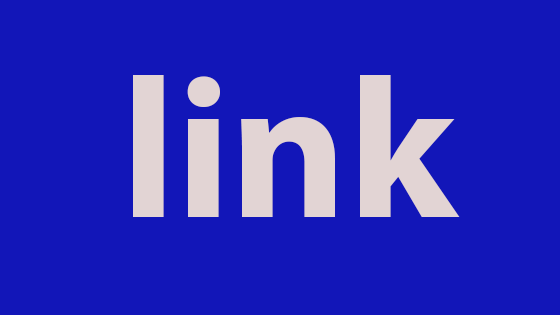
<style>
.page{position:relative;width:560px;height:315px;background:#1216b8}
.page>*{position:absolute;margin:0}
.t1{font:200px "MyriadPro-Bold";color:#e2d4d4}
</style>
<div class="page">
<p class="t1" style="left:133px;top:75px;width:327px;height:142px">link</p>
</div>
